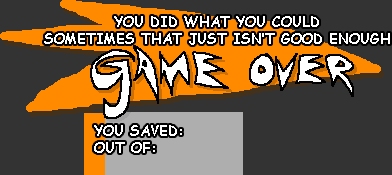
<style>
.page{position:relative;width:392px;height:175px;background:#333333}
.page>*{position:absolute;margin:0}
.t1{font:14px "ComicSansMS-Bold";color:#ffffff}
</style>
<div class="page">
<p class="t1" style="left:44px;top:16px;width:346px;height:29px;text-align:center">YOU DID WHAT YOU COULD<br>SOMETIMES THAT JUST ISN’T GOOD ENOUGH</p>
<p class="t1" style="left:94px;top:125px;width:88px;height:28px;text-align:right">YOU SAVED:<br>OUT OF:</p>
</div>
